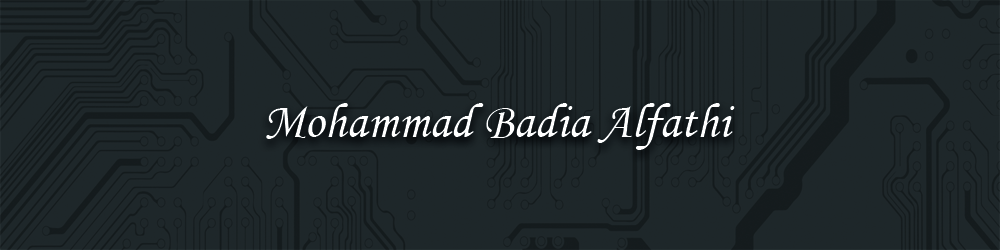
<style>
.page{position:relative;width:1000px;height:250px;background:#1e272a}
.page>*{position:absolute;margin:0}
.t1{font:50px "MonotypeCorsiva";color:#ffffff}
</style>
<div class="page">
<p class="t1" style="left:266px;top:103px;width:469px;height:47px">Mohammad Badia Alfathi</p>
</div>
